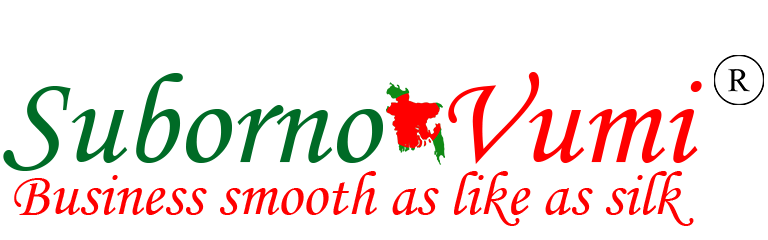
<style>
.page{position:relative;width:768px;height:240px;background:#ffffff}
.page>*{position:absolute;margin:0}
.t1{font:130px "MonotypeCorsiva";color:#006b26}
.t2{font:130px "MonotypeCorsiva";color:#ff0000}
.t3{font:63px "MonotypeCorsiva";color:#ff0000}
</style>
<div class="page">
<p class="t1" style="left:3px;top:72px;width:699px;height:99px">Suborno  <span class="t2">Vumi</span></p>
<p class="t3" style="left:14px;top:171px;width:680px;height:55px">Business smooth as like as silk</p>
</div>
